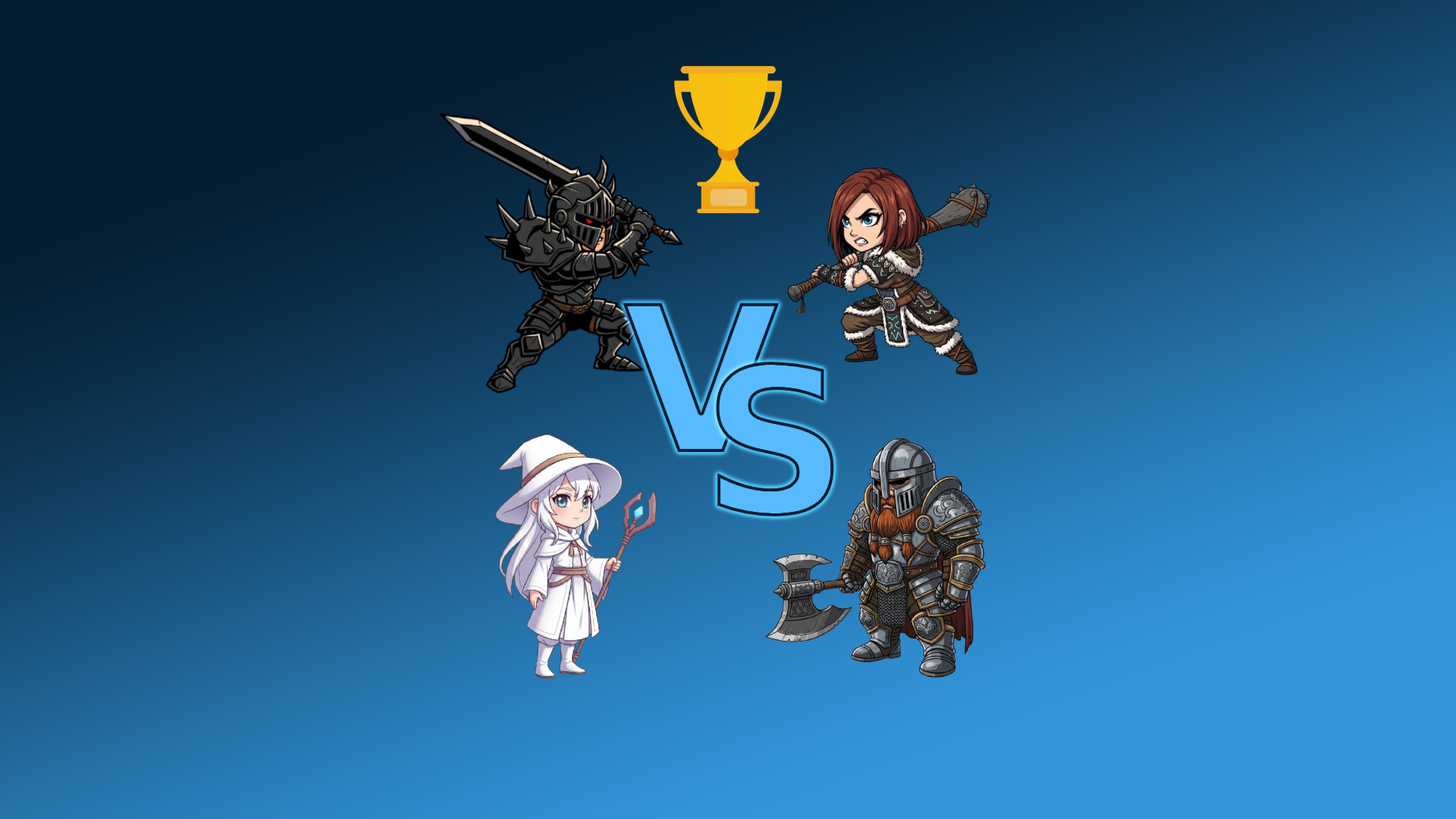
<style>
.page{position:relative;width:1456px;height:819px}
.page>*{position:absolute;margin:0}
.t1{font:204.1px "Arial-Black";letter-spacing:0.15em;color:#59bbff}
</style>
<div class="page">
<p class="t1" style="left:623px;top:303px;width:157px;height:149px">V</p>
<p class="t1" style="left:716px;top:362px;width:118px;height:154px">S</p>
</div>
